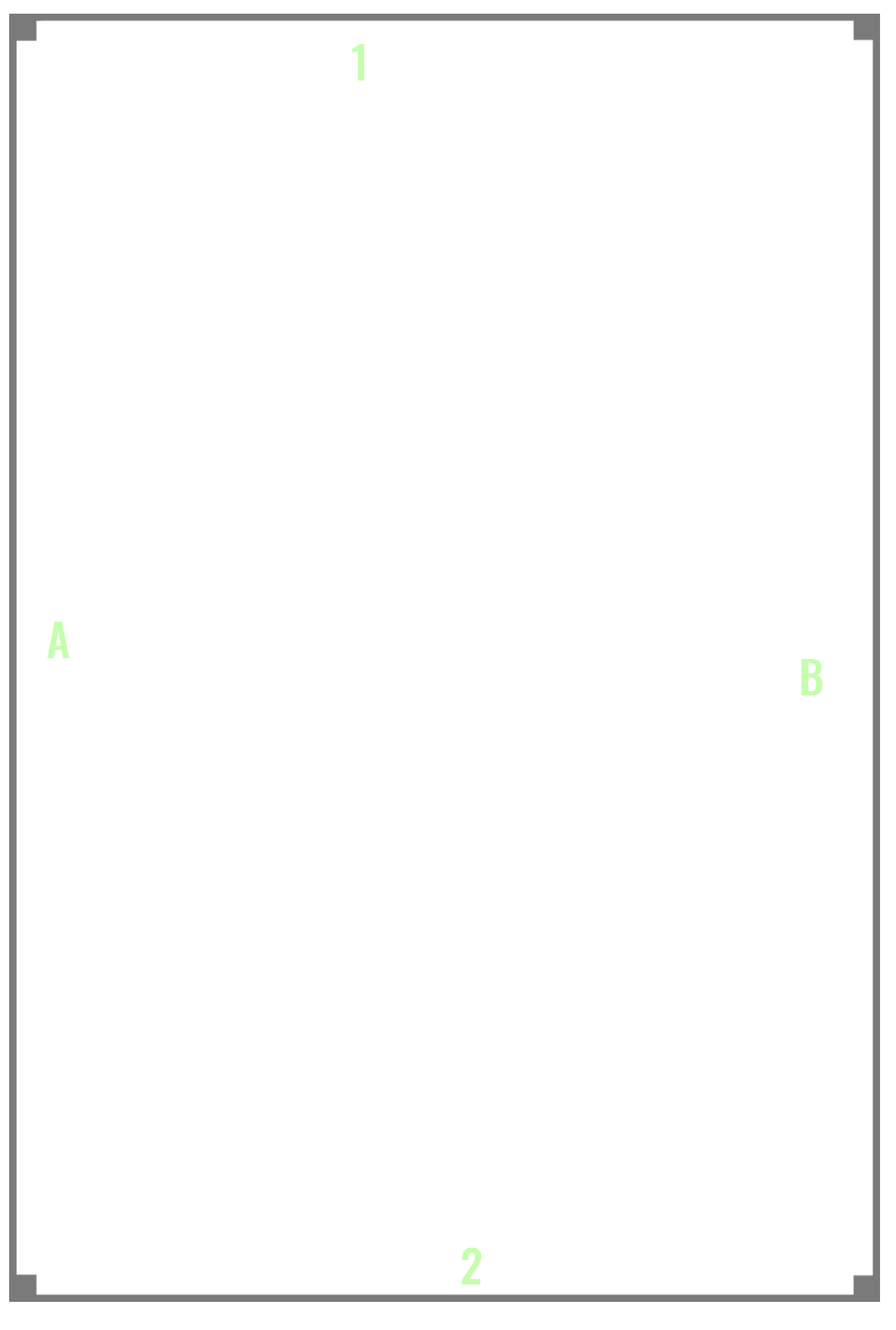
<style>
.page{position:relative;width:896px;height:1330px;background:#ffffff}
.page>*{position:absolute;margin:0}
.t1{font:45.6px "Oswald-Medium";color:#c5ffae}
</style>
<div class="page">
<p class="t1" style="left:352px;top:44px;width:13px;height:37px">1</p>
<p class="t1" style="left:47px;top:622px;width:23px;height:36px">A</p>
<p class="t1" style="left:801px;top:659px;width:22px;height:37px">B</p>
<p class="t1" style="left:461px;top:1248px;width:21px;height:37px">2</p>
</div>
